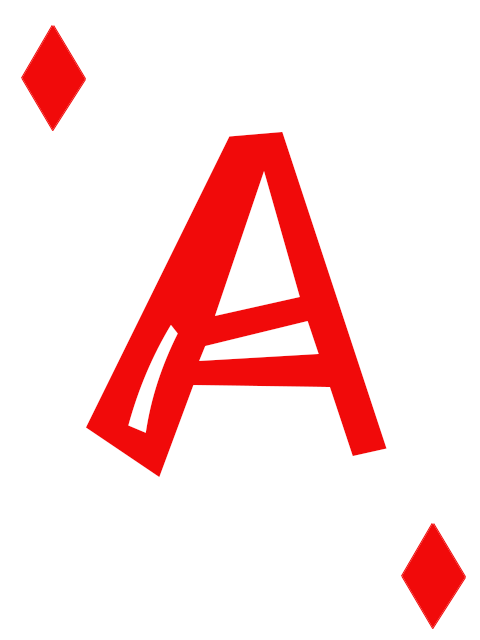
<style>
.page{position:relative;width:480px;height:640px;background:#ffffff}
.page>*{position:absolute;margin:0}
.t1{font:386.3px "Jokerman-Regular";color:#f10a0a}
</style>
<div class="page">
<p class="t1" style="left:85px;top:132px;width:302px;height:345px">A</p>
</div>
